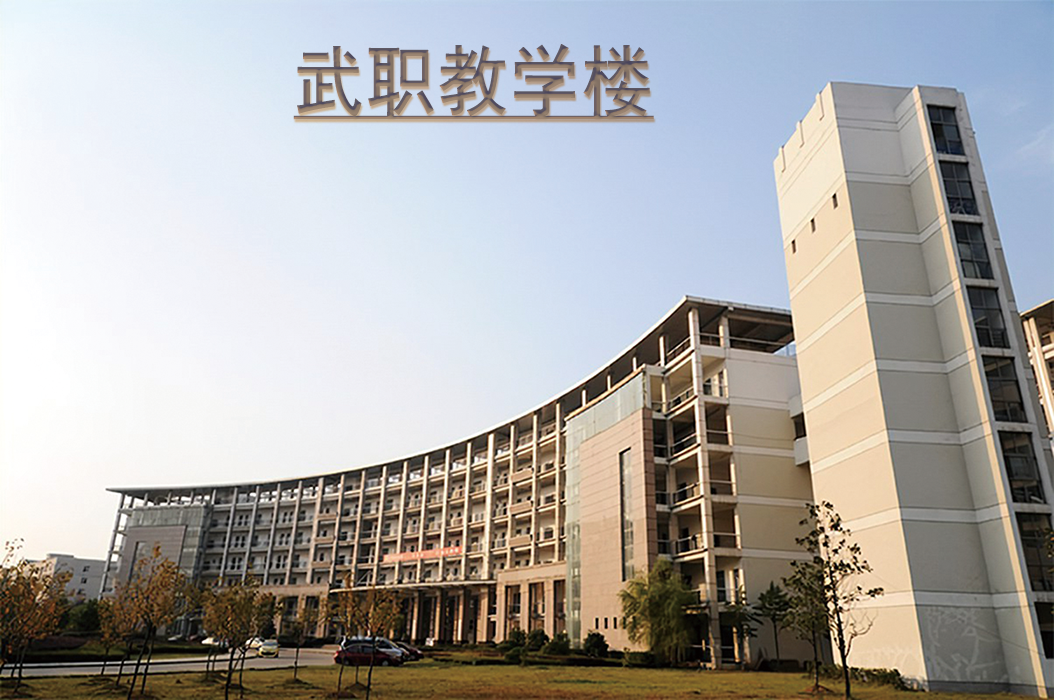
<style>
.page{position:relative;width:1054px;height:700px}
.page>*{position:absolute;margin:0}
.t1{font:77px "SimHei";font-weight:bold;text-decoration:underline;scale:0.91 1}
</style>
<div class="page">
<p class="t1" style="left:293px;top:44px;width:361px;height:76px">武职教学楼</p>
</div>
